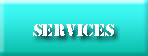
<style>
.page{position:relative;width:148px;height:56px}
.page>*{position:absolute;margin:0}
.t1{font:16px "StencilStd";color:#fcf6f6}
</style>
<div class="page">
<p class="t1" style="left:33px;top:24px;width:81px;height:12px">SERVICES</p>
</div>
